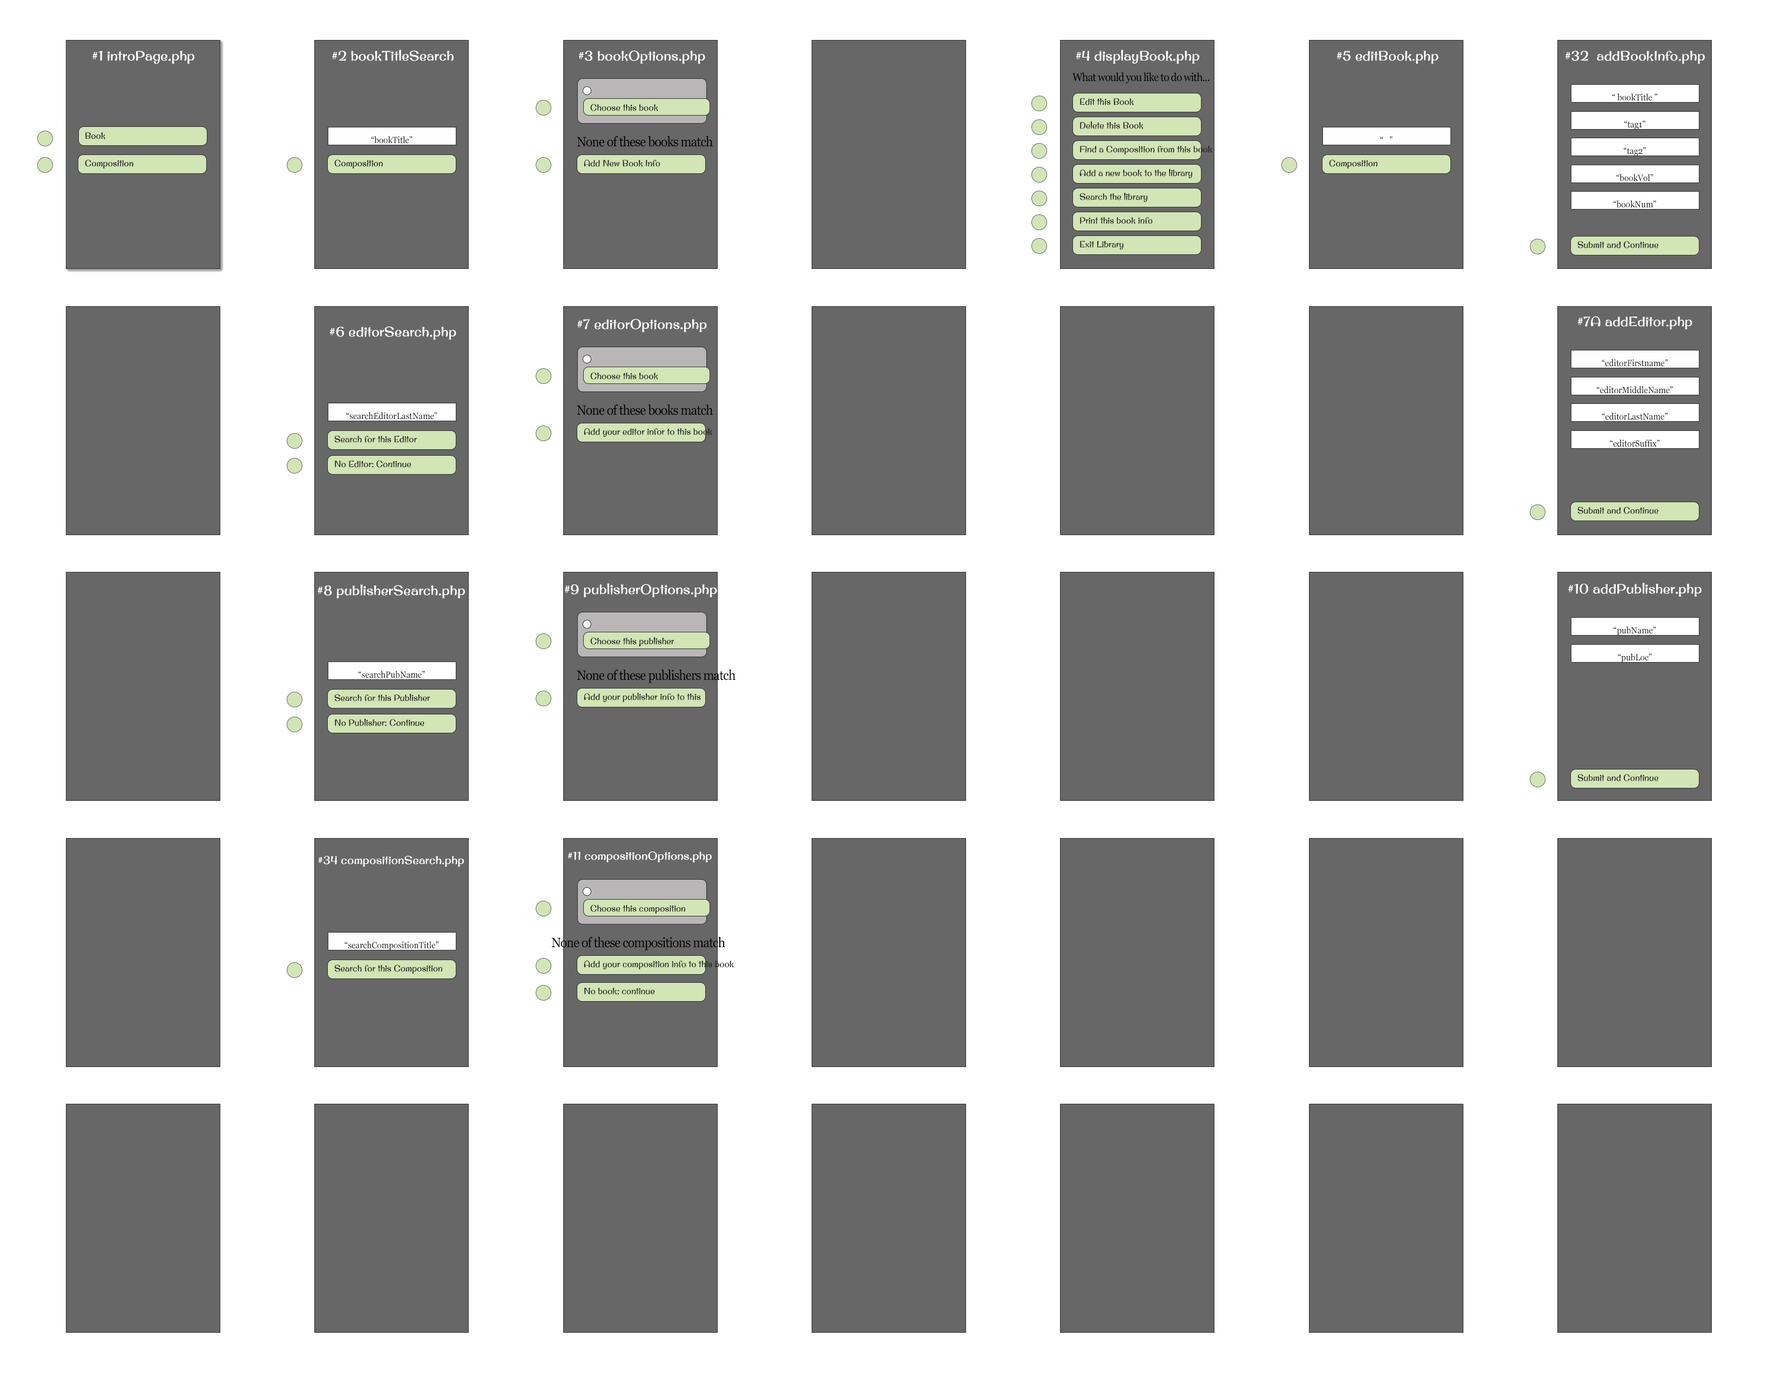
<style>
.page{position:relative;width:1782px;height:1377px;background:#ffffff}
.page>*{position:absolute;margin:0}
.t1{font:13.5px "OriginalSurfer-Regular";color:#ffffff}
.t2{font:11.2px "Georgia";letter-spacing:-0.04em;color:#000000;scale:0.92 1}
.t3{font:9px "OriginalSurfer-Regular";color:#222121;scale:0.92 1}
.t4{font:9px "Georgia";color:#222121;scale:0.92 1}
.t5{font:13.5px "Georgia";letter-spacing:-0.04em;color:#000000;scale:0.92 1}
.t6{font:11.2px "OriginalSurfer-Regular";color:#ffffff}
</style>
<div class="page">
<p class="t1" style="left:92px;top:51px;width:102px;height:13px">#1 introPage.php</p>
<p class="t1" style="left:332px;top:50px;width:122px;height:11px">#2 bookTitleSearch</p>
<p class="t1" style="left:579px;top:50px;width:126px;height:14px">#3 bookOptions.php</p>
<p class="t1" style="left:1076px;top:50px;width:123px;height:14px">#4 displayBook.php</p>
<p class="t1" style="left:1337px;top:51px;width:102px;height:13px">#5 editBook.php</p>
<p class="t1" style="left:1565px;top:51px;width:140px;height:13px">#32  addBookInfo.php</p>
<p class="t2" style="left:1072px;top:72px;width:138px;height:12px">What would you like to do with...</p>
<p class="t3" style="left:1080px;top:98px;width:54px;height:7px">Edit this Book</p>
<p class="t4" style="left:1612px;top:93px;width:45px;height:8px">“ bookTitle ”</p>
<p class="t3" style="left:590px;top:104px;width:68px;height:7px">Choose this book</p>
<p class="t3" style="left:1080px;top:121px;width:63px;height:8px">Delete this Book</p>
<p class="t4" style="left:1624px;top:120px;width:21px;height:10px">“tag1”</p>
<p class="t3" style="left:85px;top:132px;width:20px;height:7px">Book</p>
<p class="t4" style="left:371px;top:136px;width:42px;height:8px">“bookTitle”</p>
<p class="t5" style="left:577px;top:136px;width:136px;height:11px">None of these books match</p>
<p class="t4" style="left:1380px;top:136px;width:13px;height:3px">“   ”</p>
<p class="t3" style="left:1080px;top:145px;width:132px;height:9px">Find a Composition from this book</p>
<p class="t4" style="left:1624px;top:147px;width:22px;height:9px">“tag2”</p>
<p class="t3" style="left:85px;top:159px;width:48px;height:9px">Composition</p>
<p class="t3" style="left:334px;top:159px;width:49px;height:9px">Composition</p>
<p class="t3" style="left:584px;top:159px;width:76px;height:8px">Add New Book Info</p>
<p class="t3" style="left:1329px;top:159px;width:49px;height:9px">Composition</p>
<p class="t3" style="left:1079px;top:169px;width:113px;height:9px">Add a new book to the library</p>
<p class="t4" style="left:1616px;top:174px;width:37px;height:7px">“bookVol”</p>
<p class="t3" style="left:1079px;top:193px;width:68px;height:9px">Search the library</p>
<p class="t4" style="left:1614px;top:200px;width:42px;height:8px">“bookNum”</p>
<p class="t3" style="left:1080px;top:217px;width:72px;height:7px">Print this book info</p>
<p class="t3" style="left:1080px;top:241px;width:44px;height:8px">Exit Library</p>
<p class="t3" style="left:1577px;top:241px;width:81px;height:7px">Submit and Continue</p>
<p class="t1" style="left:1578px;top:316px;width:114px;height:13px">#7A addEditor.php</p>
<p class="t1" style="left:330px;top:326px;width:126px;height:14px">#6 editorSearch.php</p>
<p class="t1" style="left:577px;top:319px;width:130px;height:13px">#7 editorOptions.php</p>
<p class="t4" style="left:1602px;top:359px;width:66px;height:8px">“editorFirstname”</p>
<p class="t3" style="left:590px;top:372px;width:68px;height:8px">Choose this book</p>
<p class="t4" style="left:1597px;top:386px;width:76px;height:8px">“editorMiddleName”</p>
<p class="t4" style="left:346px;top:412px;width:91px;height:8px">“searchEditorLastName”</p>
<p class="t5" style="left:577px;top:404px;width:136px;height:11px">None of these books match</p>
<p class="t4" style="left:1602px;top:413px;width:66px;height:7px">“editorLastName”</p>
<p class="t3" style="left:334px;top:435px;width:83px;height:8px">Search for this Editor</p>
<p class="t3" style="left:584px;top:428px;width:128px;height:9px">Add your editor infor to this book</p>
<p class="t4" style="left:1610px;top:440px;width:50px;height:7px">“editorSuffix”</p>
<p class="t3" style="left:335px;top:460px;width:76px;height:8px">No Editor: Continue</p>
<p class="t3" style="left:1577px;top:507px;width:81px;height:7px">Submit and Continue</p>
<p class="t1" style="left:318px;top:584px;width:147px;height:14px">#8 publisherSearch.php</p>
<p class="t1" style="left:565px;top:583px;width:152px;height:14px">#9 publisherOptions.php</p>
<p class="t1" style="left:1568px;top:583px;width:134px;height:14px">#10 addPublisher.php</p>
<p class="t4" style="left:1614px;top:626px;width:42px;height:10px">“pubName”</p>
<p class="t3" style="left:590px;top:637px;width:84px;height:9px">Choose this publisher</p>
<p class="t4" style="left:1618px;top:653px;width:34px;height:10px">“pubLoc”</p>
<p class="t4" style="left:359px;top:671px;width:66px;height:7px">“searchPubName”</p>
<p class="t5" style="left:577px;top:670px;width:158px;height:13px">None of these publishers match</p>
<p class="t3" style="left:334px;top:694px;width:96px;height:7px">Search for this Publisher</p>
<p class="t3" style="left:584px;top:693px;width:117px;height:9px">Add your publisher info to this book</p>
<p class="t3" style="left:335px;top:719px;width:89px;height:7px">No Publisher: Continue</p>
<p class="t3" style="left:1577px;top:774px;width:81px;height:7px">Submit and Continue</p>
<p class="t6" style="left:318px;top:855px;width:146px;height:12px">#34 compositionSearch.php</p>
<p class="t6" style="left:568px;top:851px;width:144px;height:11px">#11 compositionOptions.php</p>
<p class="t3" style="left:590px;top:904px;width:95px;height:10px">Choose this composition</p>
<p class="t4" style="left:345px;top:941px;width:93px;height:9px">“searchCompositionTitle”</p>
<p class="t5" style="left:551px;top:937px;width:174px;height:13px">None of these compositions match</p>
<p class="t3" style="left:334px;top:964px;width:108px;height:10px">Search for this Composition</p>
<p class="t3" style="left:584px;top:960px;width:150px;height:9px">Add your composition info to this book</p>
<p class="t3" style="left:584px;top:988px;width:70px;height:7px">No book: continue</p>
</div>
